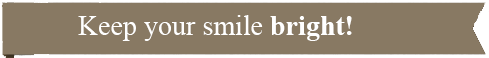
<style>
.page{position:relative;width:489px;height:58px;background:#887963}
.page>*{position:absolute;margin:0}
.t1{font:28px "TimesNewRomanPSMT";color:#ffffff}
.t2{font:28px "TimesNewRomanPS-BoldMT";color:#ffffff}
</style>
<div class="page">
<p class="t1" style="left:78px;top:15px;width:274px;height:26px">Keep your smile<span class="t2"> bright!</span></p>
</div>
